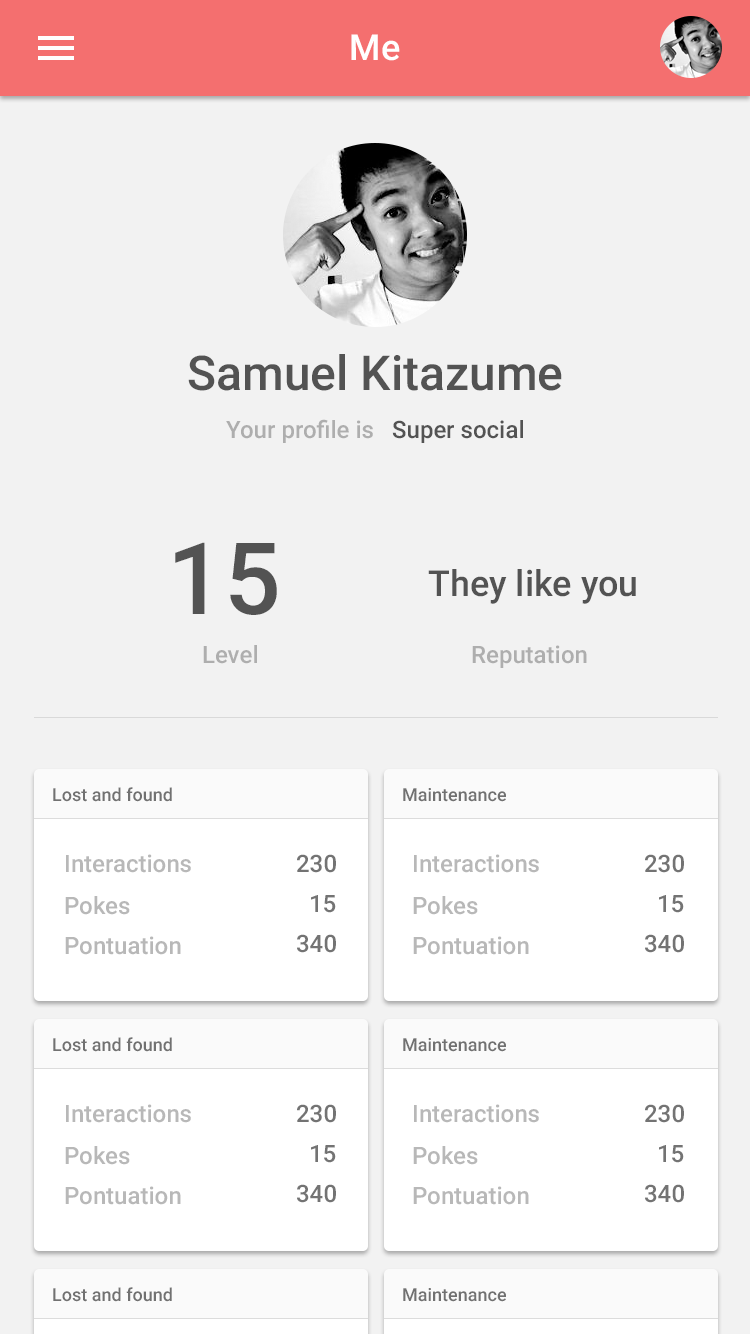
<style>
.page{position:relative;width:750px;height:1334px;background:#f2f2f2}
.page>*{position:absolute;margin:0}
.t1{font:36px "Roboto-Medium";color:#ffffff}
.t2{font:48px "Roboto-Medium";color:#535353}
.t3{font:24px "Roboto-Medium";color:#aeaeae}
.t4{font:24px "Roboto-Medium";color:#535353}
.t5{font:100px "Roboto-Medium";color:#535353}
.t6{font:36px "Roboto-Medium";color:#535353}
.t7{font:18px "Roboto-Medium";color:#717171}
.t8{font:24px "Roboto-Medium";color:#b8b8b8}
.t9{font:24px "Roboto-Medium";color:#737373}
</style>
<div class="page">
<p class="t1" style="left:351px;top:34px;width:49px;height:27px">Me</p>
<p class="t2" style="left:188px;top:354px;width:374px;height:37px">Samuel Kitazume</p>
<p class="t3" style="left:226px;top:419px;width:147px;height:24px">Your profile is</p>
<p class="t4" style="left:392px;top:420px;width:131px;height:23px">Super social</p>
<p class="t5" style="left:175px;top:542px;width:102px;height:73px">15</p>
<p class="t6" style="left:428px;top:569px;width:208px;height:35px">They like you</p>
<p class="t3" style="left:203px;top:645px;width:54px;height:19px">Level</p>
<p class="t3" style="left:472px;top:645px;width:115px;height:23px">Reputation</p>
<p class="t7" style="left:53px;top:787px;width:119px;height:15px">Lost and found</p>
<p class="t7" style="left:403px;top:788px;width:103px;height:14px">Maintenance</p>
<p class="t8" style="left:66px;top:854px;width:125px;height:19px">Interactions</p>
<p class="t9" style="left:297px;top:854px;width:39px;height:19px">230</p>
<p class="t8" style="left:414px;top:854px;width:125px;height:19px">Interactions</p>
<p class="t9" style="left:645px;top:854px;width:39px;height:19px">230</p>
<p class="t8" style="left:65px;top:896px;width:65px;height:19px">Pokes</p>
<p class="t9" style="left:311px;top:895px;width:25px;height:18px">15</p>
<p class="t8" style="left:413px;top:896px;width:65px;height:19px">Pokes</p>
<p class="t9" style="left:659px;top:895px;width:25px;height:18px">15</p>
<p class="t8" style="left:65px;top:936px;width:116px;height:19px">Pontuation</p>
<p class="t9" style="left:297px;top:934px;width:39px;height:19px">340</p>
<p class="t8" style="left:413px;top:936px;width:116px;height:19px">Pontuation</p>
<p class="t9" style="left:645px;top:934px;width:39px;height:19px">340</p>
<p class="t7" style="left:53px;top:1037px;width:119px;height:15px">Lost and found</p>
<p class="t7" style="left:403px;top:1038px;width:103px;height:14px">Maintenance</p>
<p class="t8" style="left:66px;top:1104px;width:125px;height:19px">Interactions</p>
<p class="t9" style="left:297px;top:1104px;width:39px;height:19px">230</p>
<p class="t8" style="left:414px;top:1104px;width:125px;height:19px">Interactions</p>
<p class="t9" style="left:645px;top:1104px;width:39px;height:19px">230</p>
<p class="t9" style="left:311px;top:1145px;width:25px;height:18px">15</p>
<p class="t9" style="left:659px;top:1145px;width:25px;height:18px">15</p>
<p class="t8" style="left:65px;top:1146px;width:65px;height:19px">Pokes</p>
<p class="t8" style="left:413px;top:1146px;width:65px;height:19px">Pokes</p>
<p class="t8" style="left:65px;top:1186px;width:116px;height:19px">Pontuation</p>
<p class="t9" style="left:297px;top:1184px;width:39px;height:19px">340</p>
<p class="t8" style="left:413px;top:1186px;width:116px;height:19px">Pontuation</p>
<p class="t9" style="left:645px;top:1184px;width:39px;height:19px">340</p>
<p class="t7" style="left:53px;top:1287px;width:119px;height:15px">Lost and found</p>
<p class="t7" style="left:403px;top:1288px;width:103px;height:14px">Maintenance</p>
</div>
